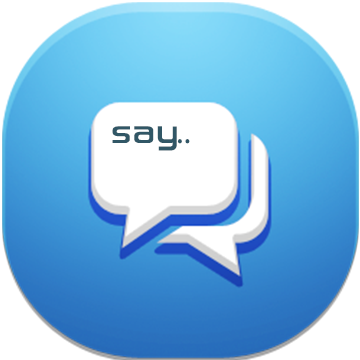
<style>
.page{position:relative;width:360px;height:360px;background:#ffffff}
.page>*{position:absolute;margin:0}
.t1{font:45px "SonySketchEF";color:#315766}
</style>
<div class="page">
<p class="t1" style="left:112px;top:126px;width:78px;height:25px">say..</p>
</div>
